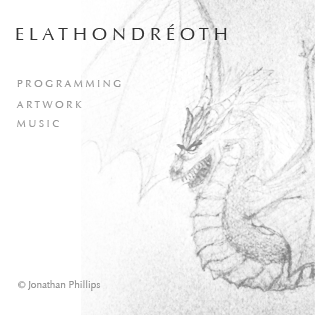
<style>
.page{position:relative;width:315px;height:315px;background:#ffffff}
.page>*{position:absolute;margin:0}
.t1{font:18px "Optima-Regular";color:#323232}
.t2{font:10px "Optima-Regular";color:#999999}
</style>
<div class="page">
<p class="t1" style="left:16px;top:24px;width:211px;height:16px">E L A T H O N D R É O T H</p>
<p class="t2" style="left:17px;top:80px;width:104px;height:7px">P R O G R A M M I N G</p>
<p class="t2" style="left:16px;top:101px;width:66px;height:7px">A R T W O R K</p>
<p class="t2" style="left:17px;top:120px;width:42px;height:7px">M U S I C</p>
<p class="t2" style="left:18px;top:280px;width:83px;height:11px">© Jonathan Phillips</p>
</div>
